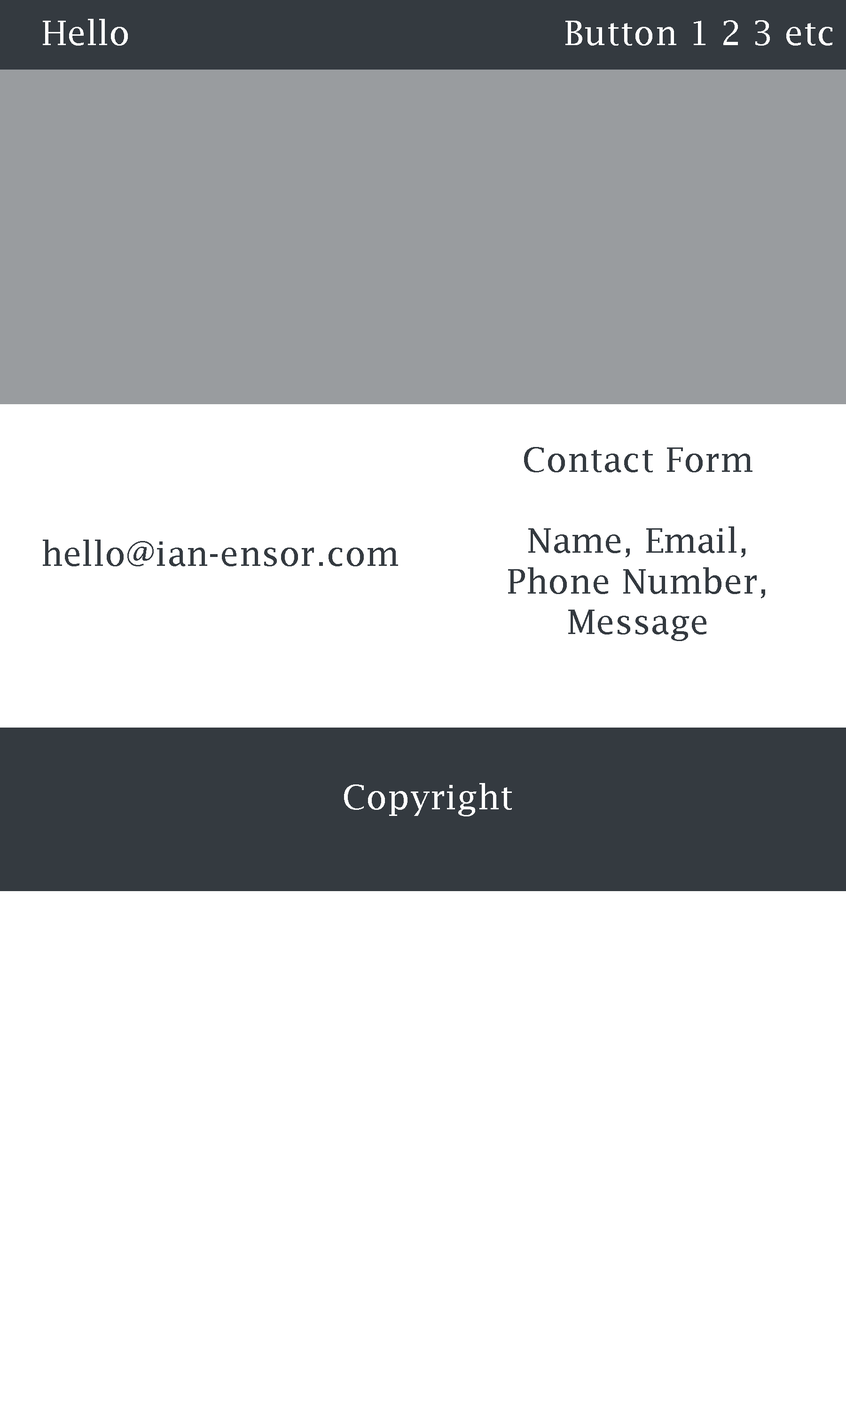
<style>
.page{position:relative;width:846px;height:1410px;background:#ffffff}
.page>*{position:absolute;margin:0}
.t1{font:33.8px "LucidaFax";color:#ffffff}
.t2{font:33.8px "LucidaFax";color:#343a40}
</style>
<div class="page">
<p class="t1" style="left:43px;top:19px;width:85px;height:27px">Hello</p>
<p class="t1" style="left:565px;top:20px;width:267px;height:26px">Button 1 2 3 etc</p>
<p class="t2" style="left:508px;top:447px;width:257px;height:194px;text-align:center">Contact Form<br><br>Name, Email,<br>Phone Number,<br>Message</p>
<p class="t2" style="left:43px;top:539px;width:355px;height:27px">hello@ian-ensor.com</p>
<p class="t1" style="left:344px;top:783px;width:168px;height:33px">Copyright</p>
</div>
